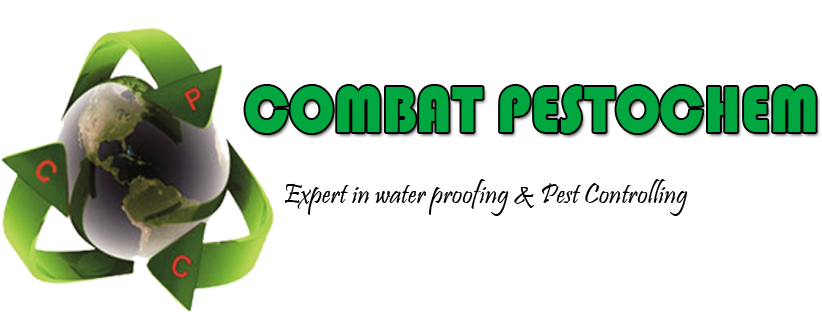
<style>
.page{position:relative;width:822px;height:312px;background:#ffffff}
.page>*{position:absolute;margin:0}
.t1{font:67.9px "Bauhaus93";color:#00a741;scale:0.88 1}
.t2{font:29.2px "Pristina-Regular";color:#010101}
</style>
<div class="page">
<p class="t1" style="left:245px;top:86px;width:571px;height:47px">COMBAT PESTOCHEM</p>
<p class="t2" style="left:284px;top:179px;width:404px;height:37px">Expert in water proofing &amp; Pest Controlling</p>
</div>
